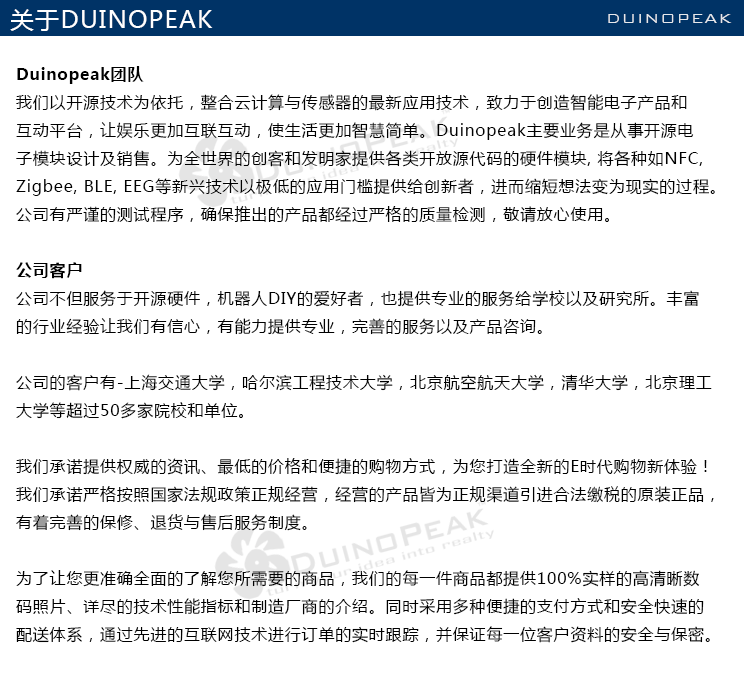
<style>
.page{position:relative;width:744px;height:680px;background:#ffffff}
.page>*{position:absolute;margin:0}
.t1{font:24px "MicrosoftYaHei";letter-spacing:0.05em;color:#ffffff}
.t2{font:18px "BankGothicBT-Light";letter-spacing:0.05em;color:#e6e8ec}
.t3{font:16px "MicrosoftYaHei";letter-spacing:0.05em;color:#000000}
.t4{font:16px "MicrosoftYaHei-Bold";letter-spacing:0.05em;color:#000000}
</style>
<div class="page">
<p class="t1" style="left:10px;top:9px;width:203px;height:22px">关于DUINOPEAK：</p>
<p class="t2" style="left:608px;top:14px;width:124px;height:9px">DUINOPEAK</p>
<p class="t3" style="left:16px;top:66px;width:699px;height:577px"><span class="t4">Duinopeak团队<br></span>我们以开源技术为依托，整合云计算与传感器的最新应用技术，致力于创造智能电子产品和<br>互动平台，让娱乐更加互联互动，使生活更加智慧简单。Duinopeak主要业务是从事开源电<br>子模块设计及销售。为全世界的创客和发明家提供各类开放源代码的硬件模块, 将各种如NFC, <br>Zigbee, BLE, EEG等新兴技术以极低的应用门槛提供给创新者，进而缩短想法变为现实的过程。<br>公司有严谨的测试程序，确保推出的产品都经过严格的质量检测，敬请放心使用。<br> <br><span class="t4">公司客户<br></span>公司不但服务于开源硬件，机器人DIY的爱好者，也提供专业的服务给学校以及研究所。丰富<br>的行业经验让我们有信心，有能力提供专业，完善的服务以及产品咨询。<br><br>公司的客户有-上海交通大学，哈尔滨工程技术大学，北京航空航天大学，清华大学，北京理工<br>大学等超过50多家院校和单位。<br><br>我们承诺提供权威的资讯、最低的价格和便捷的购物方式，为您打造全新的E时代购物新体验！<br>我们承诺严格按照国家法规政策正规经营，经营的产品皆为正规渠道引进合法缴税的原装正品，<br>有着完善的保修、退货与售后服务制度。<br><br>为了让您更准确全面的了解您所需要的商品，我们的每一件商品都提供100%实样的高清晰数<br>码照片、详尽的技术性能指标和制造厂商的介绍。同时采用多种便捷的支付方式和安全快速的<br>配送体系，通过先进的互联网技术进行订单的实时跟踪，并保证每一位客户资料的安全与保密。</p>
</div>
